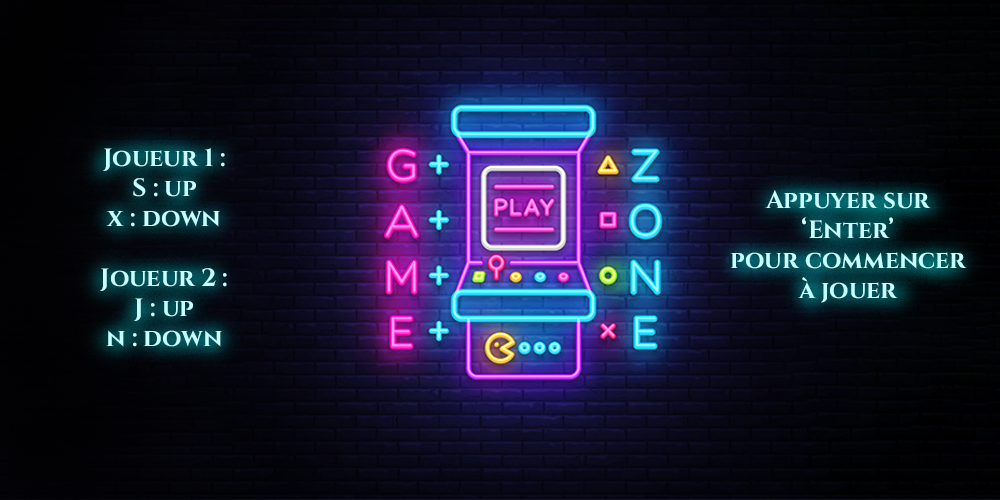
<style>
.page{position:relative;width:1000px;height:500px}
.page>*{position:absolute;margin:0}
.t1{font:25px "Cinzel-Bold";color:#c7feff}
</style>
<div class="page">
<p class="t1" style="left:100px;top:148px;width:127px;height:199px;text-align:center">Joueur 1 :<br>S : up<br>x : down<br><br>Joueur 2 :<br>J : up<br>n : down</p>
<p class="t1" style="left:730px;top:190px;width:237px;height:113px;text-align:center">Appuyer sur <br>‘Enter’<br>pour commencer<br>à jouer</p>
</div>
